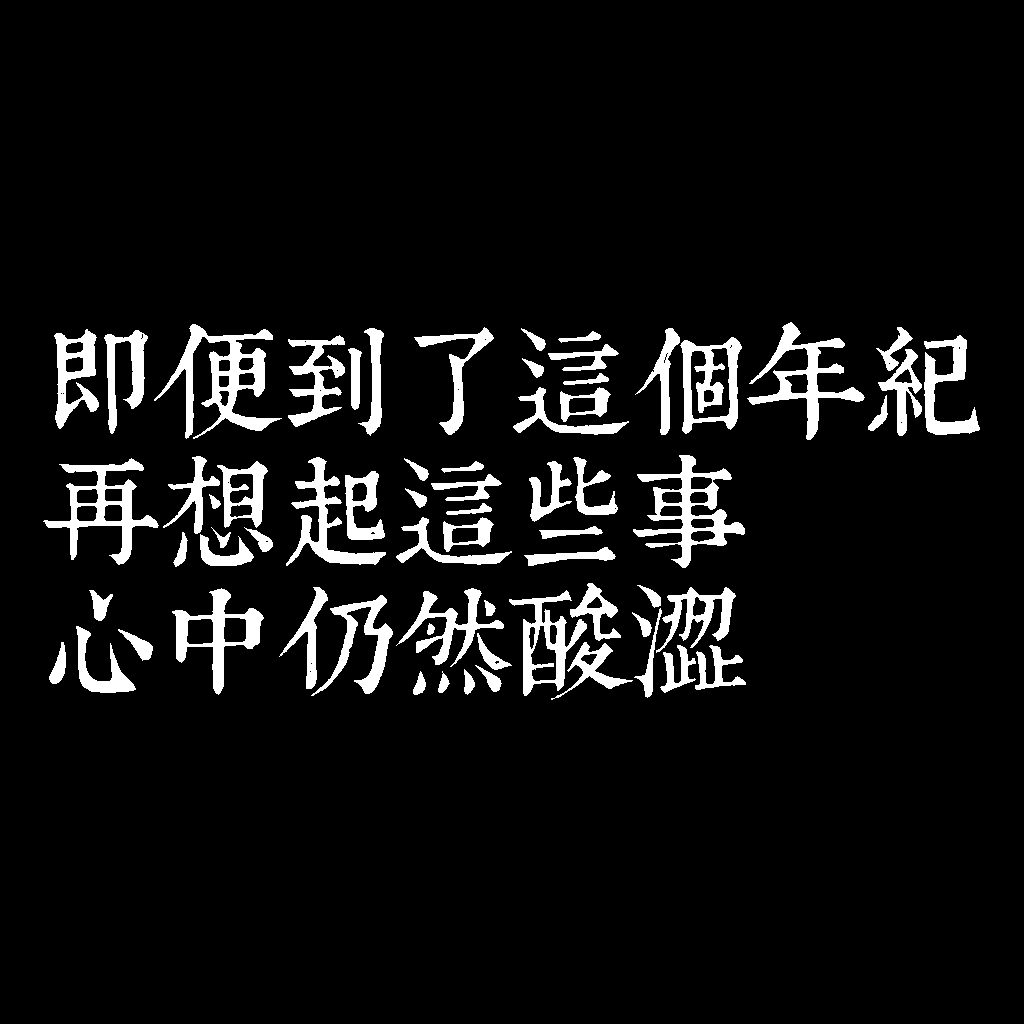
<style>
.page{position:relative;width:1024px;height:1024px;background:#000000}
.page>*{position:absolute;margin:0}
.t1{font:120px/130px "TpldKhangXiDictTrial";letter-spacing:-0.02em;color:#ffffff}
</style>
<div class="page">
<p class="t1" style="left:43px;top:322px;width:937px;height:378px">即便到了這個年紀<br>再想起這些事<br>心中仍然酸澀</p>
</div>
